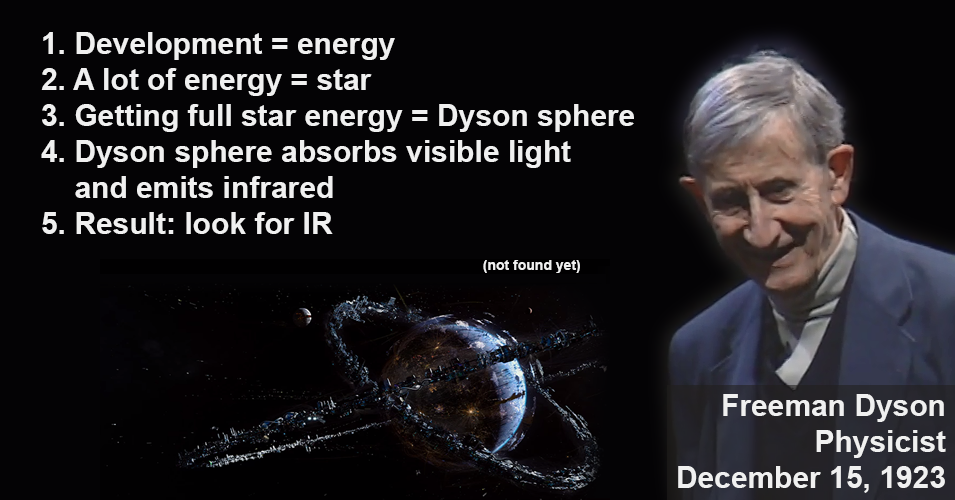
<style>
.page{position:relative;width:955px;height:500px;background:#040305}
.page>*{position:absolute;margin:0}
.t1{font:30px "Arial-BoldMT";color:#f0f0f0}
.t2{font:14px "Arial-BoldMT";color:#f0f0f0}
</style>
<div class="page">
<p class="t1" style="left:41px;top:32px;width:593px;height:241px">1. Development = energy<br>2. A lot of energy = star<br>3. Getting full star energy = Dyson sphere<br>4. Dyson sphere absorbs visible light<br>    and emits infrared<br>5. Result: look for IR  <br>                                                     <span class="t2">(not found yet)</span></p>
<p class="t1" style="left:678px;top:394px;width:268px;height:99px;text-align:right">Freeman Dyson<br>Physicist<br> December 15, 1923</p>
</div>
